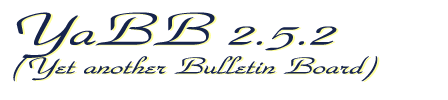
<style>
.page{position:relative;width:448px;height:100px;background:#ffffff}
.page>*{position:absolute;margin:0}
.t1{font:24px "WaldorfScriptExtendedItalicSWFTE";color:#16244d}
.t2{font:36px "WaldorfScriptExtendedItalicSWFTE";color:#16244d}
.t3{font:48px "WaldorfScriptExtendedItalicSWFTE";color:#16244d}
.t4{font:24px "WaldorfScriptExtendedItalicSWFTE"}
.t5{font:48px "WaldorfScriptExtendedItalicSWFTE"}
</style>
<div class="page">
<p class="t1" style="left:13px;top:12px;width:365px;height:70px"><span class="t2"><br></span><span class="t3">YaBB 2.5.2<br></span>(Yet another Bulletin Board)</p>
<p class="t4" style="left:15px;top:13px;width:365px;height:69px"><span class="t5">YaBB 2.5.2<br></span>(Yet another Bulletin Board)</p>
</div>
